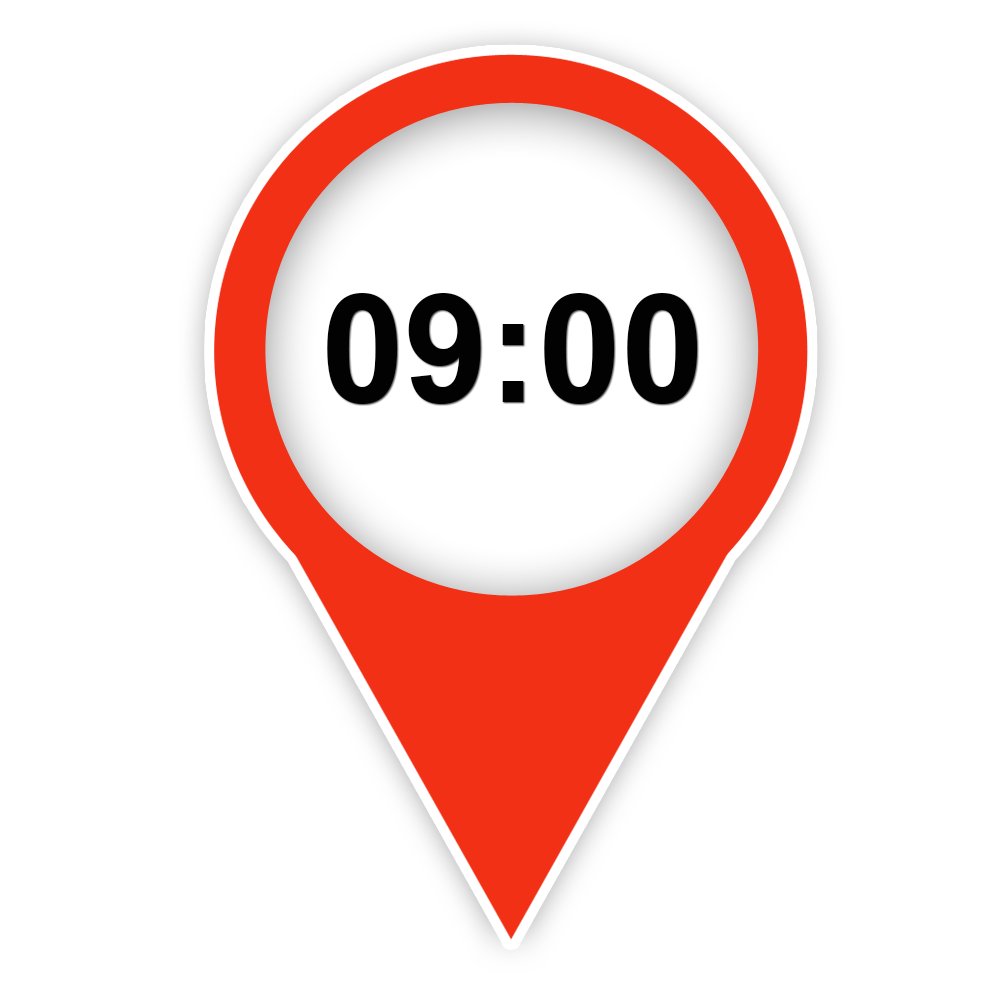
<style>
.page{position:relative;width:1000px;height:1000px;background:#ffffff}
.page>*{position:absolute;margin:0}
.t1{font:150px "Arial-BoldMT";color:#020202}
</style>
<div class="page">
<p class="t1" style="left:327px;top:293px;width:371px;height:111px">09:00</p>
</div>
